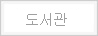
<style>
.page{position:relative;width:98px;height:36px;background:#ffffff}
.page>*{position:absolute;margin:0}
.t1{font:14px "Gulim";color:#a0a0a0}
</style>
<div class="page">
<p class="t1" style="left:26px;top:13px;width:41px;height:13px">도서관</p>
</div>
